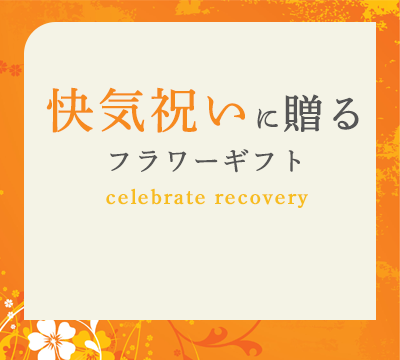
<style>
.page{position:relative;width:400px;height:360px;background:#f4f3e6}
.page>*{position:absolute;margin:0}
.t1{font:26.7px/21.3px "DNPShueiMinPr6-M";letter-spacing:0.05em;color:#555555;font-weight:bold}
.t2{font:48px/21.3px "DNPShueiMinPr6-M";letter-spacing:0.05em;color:#f68a1e;font-weight:bold}
.t3{font:40px/21.3px "DNPShueiMinPr6-M";letter-spacing:0.05em;color:#555555;font-weight:bold}
.t4{font:21.3px "DNPShueiMinPr6-M";letter-spacing:0.05em;color:#f7bd1f;font-weight:bold}
</style>
<div class="page">
<p class="t1" style="left:46px;top:87px;width:313px;height:86px;text-align:center"><span class="t2">快気祝い</span>に<span class="t3">贈る<br></span><br>フラワーギフト</p>
<p class="t4" style="left:106px;top:188px;width:202px;height:20px">celebrate recovery</p>
</div>
